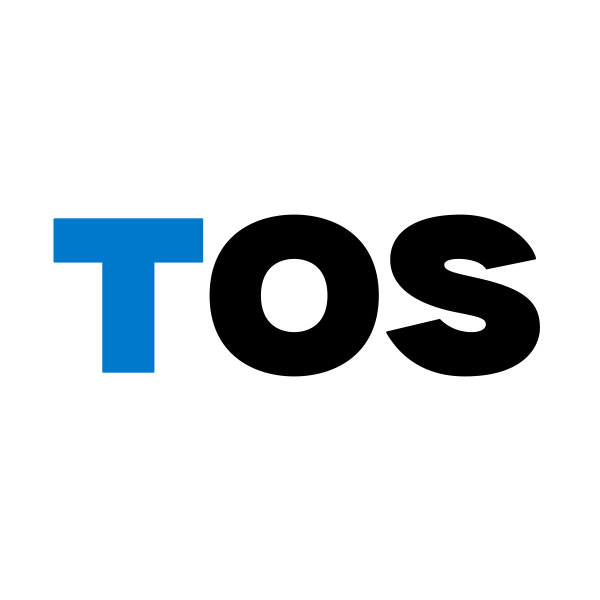
<style>
.page{position:relative;width:600px;height:600px;background:#ffffff}
.page>*{position:absolute;margin:0}
.t1{font:218.6px "MilkerRegular";letter-spacing:-0.01em;color:#000000;font-weight:bold}
.t2{font:218.6px "MilkerRegular";letter-spacing:-0.01em;color:#0079cd;font-weight:bold}
</style>
<div class="page">
<p class="t1" style="left:53px;top:214px;width:487px;height:163px"><span class="t2">T</span>OS</p>
</div>
